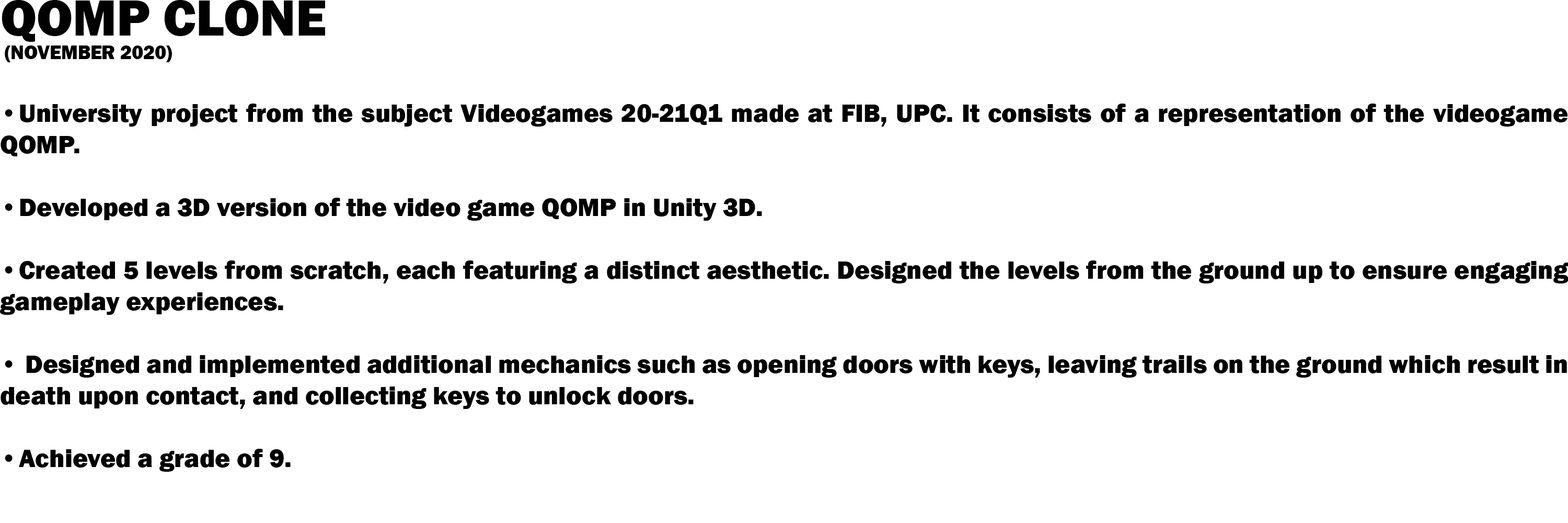
<style>
.page{position:relative;width:1568px;height:523px;background:#ffffff}
.page>*{position:absolute;margin:0}
.t1{font:26.1px "FranklinGothic-Heavy";color:#000000}
.t2{font:52.3px "FranklinGothic-Heavy";color:#000000}
.t3{font:19.6px "FranklinGothic-Heavy";color:#000000}
</style>
<div class="page">
<p class="t1" style="left:0px;top:0px;width:1569px;height:471px"><span class="t2">QOMP CLONE<br></span><span class="t3"> (NOVEMBER 2020)<br></span><br>• University project from the subject Videogames 20-21Q1 made at FIB, UPC. It consists of a representation of the videogame QOMP. <br><br>• Developed a 3D version of the video game QOMP in Unity 3D.<br><br>• Created 5 levels from scratch, each featuring a distinct aesthetic. Designed the levels from the ground up to ensure engaging gameplay experiences.<br><br>•  Designed and implemented additional mechanics such as opening doors with keys, leaving trails on the ground which result in death upon contact, and collecting keys to unlock doors.<br><br>• Achieved a grade of 9.</p>
</div>
